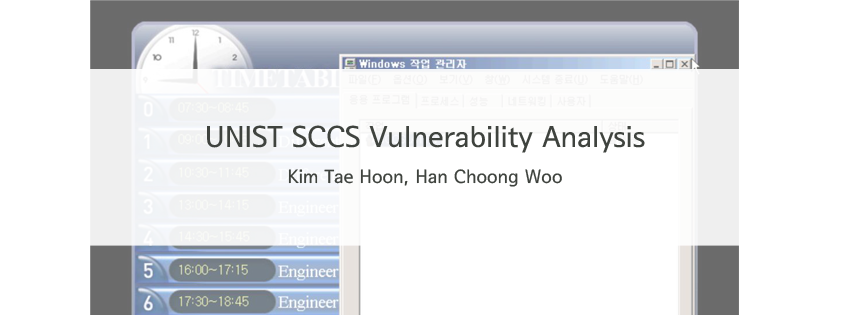
<style>
.page{position:relative;width:850px;height:315px;background:#ffffff}
.page>*{position:absolute;margin:0}
.t1{font:29.3px/40px "SeoulNamsanB";color:#3f433e}
.t2{font:18.7px/36px "SeoulNamsanB";color:#3f433e}
</style>
<div class="page">
<p class="t1" style="left:207px;top:125px;width:438px;height:62px;text-align:center">UNIST SCCS Vulnerability Analysis<br><span class="t2">Kim Tae Hoon, Han Choong Woo</span></p>
</div>
